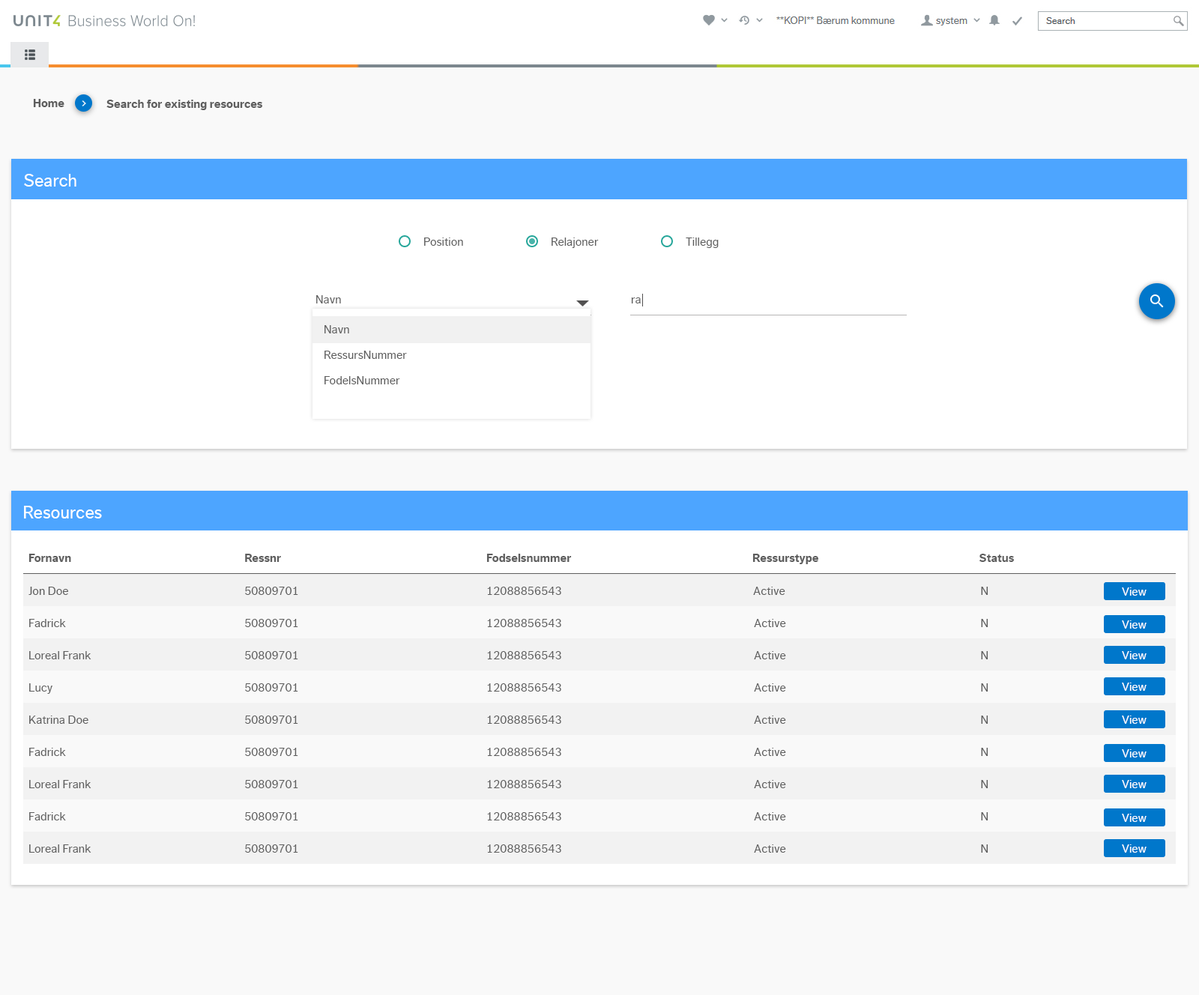
<style>
.page{position:relative;width:1199px;height:995px;background:#ffffff}
.page>*{position:absolute;margin:0}
.t1{font:12px "DagnyCompPro-Bold";color:#5e5e5e}
.t2{font:18px "DagnyCompPro";color:#ffffff}
.t3{font:12px "DagnyCompPro";color:#5e5e5e}
.t4{font:12px "DagnyCompPro";color:#ffffff}
</style>
<div class="page">
<p class="t1" style="left:33px;top:99px;width:31px;height:8px">Home</p>
<p class="t1" style="left:106px;top:100px;width:156px;height:10px">Search for existing resources</p>
<p class="t2" style="left:24px;top:174px;width:52px;height:13px">Search</p>
<p class="t3" style="left:424px;top:237px;width:39px;height:9px">Position</p>
<p class="t3" style="left:551px;top:237px;width:48px;height:11px">Relajoner</p>
<p class="t3" style="left:685px;top:237px;width:33px;height:11px">Tillegg</p>
<p class="t3" style="left:316px;top:295px;width:25px;height:8px">Navn</p>
<p class="t3" style="left:631px;top:297px;width:10px;height:6px">ra</p>
<p class="t3" style="left:324px;top:325px;width:83px;height:59px">Navn<br>RessursNummer<br>FodelsNummer</p>
<p class="t2" style="left:24px;top:506px;width:78px;height:12px">Resources</p>
<p class="t1" style="left:28px;top:554px;width:43px;height:8px">Fornavn</p>
<p class="t1" style="left:245px;top:554px;width:36px;height:8px">Ressnr</p>
<p class="t1" style="left:486px;top:554px;width:86px;height:8px">Fodselsnummer</p>
<p class="t1" style="left:752px;top:554px;width:66px;height:10px">Ressurstype</p>
<p class="t1" style="left:978px;top:554px;width:36px;height:8px">Status</p>
<p class="t3" style="left:28px;top:587px;width:40px;height:8px">Jon Doe</p>
<p class="t3" style="left:245px;top:587px;width:53px;height:8px">50809701</p>
<p class="t3" style="left:487px;top:587px;width:74px;height:8px">12088856543</p>
<p class="t3" style="left:753px;top:587px;width:32px;height:8px">Active</p>
<p class="t3" style="left:981px;top:587px;width:7px;height:8px">N</p>
<p class="t4" style="left:1121px;top:587px;width:25px;height:9px">View</p>
<p class="t3" style="left:29px;top:619px;width:37px;height:8px">Fadrick</p>
<p class="t3" style="left:245px;top:619px;width:53px;height:8px">50809701</p>
<p class="t3" style="left:487px;top:619px;width:74px;height:8px">12088856543</p>
<p class="t3" style="left:754px;top:619px;width:32px;height:8px">Active</p>
<p class="t3" style="left:981px;top:619px;width:7px;height:8px">N</p>
<p class="t4" style="left:1121px;top:620px;width:25px;height:9px">View</p>
<p class="t3" style="left:29px;top:651px;width:62px;height:8px">Loreal Frank</p>
<p class="t3" style="left:245px;top:651px;width:53px;height:8px">50809701</p>
<p class="t3" style="left:487px;top:651px;width:74px;height:8px">12088856543</p>
<p class="t3" style="left:754px;top:651px;width:32px;height:8px">Active</p>
<p class="t3" style="left:981px;top:651px;width:7px;height:8px">N</p>
<p class="t4" style="left:1121px;top:651px;width:25px;height:8px">View</p>
<p class="t3" style="left:29px;top:683px;width:23px;height:11px">Lucy</p>
<p class="t3" style="left:245px;top:683px;width:53px;height:8px">50809701</p>
<p class="t3" style="left:487px;top:683px;width:74px;height:8px">12088856543</p>
<p class="t3" style="left:754px;top:683px;width:32px;height:8px">Active</p>
<p class="t3" style="left:981px;top:683px;width:7px;height:8px">N</p>
<p class="t4" style="left:1121px;top:682px;width:25px;height:9px">View</p>
<p class="t3" style="left:29px;top:715px;width:59px;height:9px">Katrina Doe</p>
<p class="t3" style="left:245px;top:715px;width:53px;height:9px">50809701</p>
<p class="t3" style="left:487px;top:715px;width:74px;height:9px">12088856543</p>
<p class="t3" style="left:754px;top:715px;width:32px;height:9px">Active</p>
<p class="t3" style="left:981px;top:715px;width:7px;height:9px">N</p>
<p class="t4" style="left:1121px;top:715px;width:25px;height:9px">View</p>
<p class="t3" style="left:29px;top:748px;width:37px;height:8px">Fadrick</p>
<p class="t3" style="left:245px;top:748px;width:53px;height:8px">50809701</p>
<p class="t3" style="left:487px;top:748px;width:74px;height:8px">12088856543</p>
<p class="t3" style="left:754px;top:748px;width:32px;height:8px">Active</p>
<p class="t3" style="left:981px;top:748px;width:7px;height:8px">N</p>
<p class="t4" style="left:1121px;top:749px;width:25px;height:8px">View</p>
<p class="t3" style="left:29px;top:780px;width:62px;height:8px">Loreal Frank</p>
<p class="t3" style="left:245px;top:780px;width:53px;height:8px">50809701</p>
<p class="t3" style="left:487px;top:780px;width:74px;height:8px">12088856543</p>
<p class="t3" style="left:754px;top:780px;width:32px;height:8px">Active</p>
<p class="t3" style="left:981px;top:780px;width:7px;height:8px">N</p>
<p class="t4" style="left:1121px;top:780px;width:25px;height:8px">View</p>
<p class="t3" style="left:29px;top:812px;width:37px;height:8px">Fadrick</p>
<p class="t3" style="left:245px;top:812px;width:53px;height:8px">50809701</p>
<p class="t3" style="left:487px;top:812px;width:74px;height:8px">12088856543</p>
<p class="t3" style="left:754px;top:812px;width:32px;height:8px">Active</p>
<p class="t3" style="left:981px;top:812px;width:7px;height:8px">N</p>
<p class="t4" style="left:1121px;top:814px;width:25px;height:8px">View</p>
<p class="t3" style="left:29px;top:844px;width:62px;height:9px">Loreal Frank</p>
<p class="t3" style="left:245px;top:844px;width:53px;height:9px">50809701</p>
<p class="t3" style="left:487px;top:844px;width:74px;height:9px">12088856543</p>
<p class="t3" style="left:754px;top:844px;width:32px;height:9px">Active</p>
<p class="t3" style="left:981px;top:844px;width:7px;height:9px">N</p>
<p class="t4" style="left:1121px;top:844px;width:25px;height:9px">View</p>
</div>
